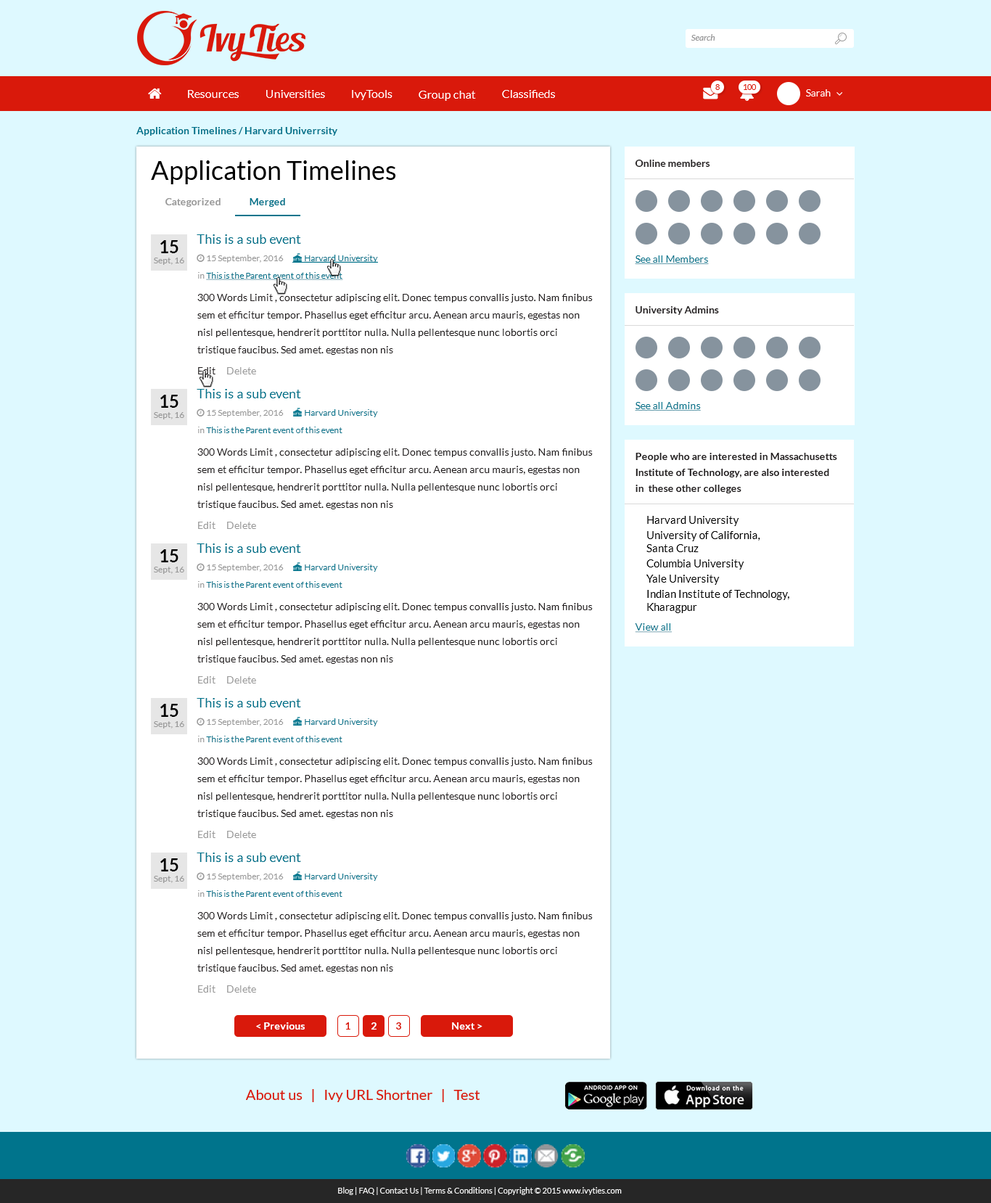
<style>
.page{position:relative;width:991px;height:1203px;background:#def9ff}
.page>*{position:absolute;margin:0}
.t1{font:10.2px "Lato-Bold";color:#00748c}
.t2{font:26.1px "Lato-Regular";color:#000000}
.t3{font:10.2px "Lato-Bold";color:#231f20}
.t4{font:10.2px "Lato-Bold";color:#999999}
.t5{font:8.7px "Lato-Regular";color:#999999}
.t6{font:17.4px "Lato-Bold";color:#000000}
.t7{font:13.1px "Lato-Regular";color:#00748c}
.t8{font:8.7px "Lato-Regular";color:#00748c;text-decoration:underline}
.t9{font:10.2px "Lato-Regular";color:#00748c;text-decoration:underline}
.t10{font:10.2px/17.4px "Lato-Regular";color:#231f20}
.t11{font:10.2px "Lato-Regular";color:#999999}
.t12{font:10.2px "Lato-Regular";color:#231f20}
.t13{font:8.7px "Lato-Regular";color:#00748c}
.t14{font:10.2px/16px "Lato-Bold";color:#231f20}
.t15{font:10.9px "Lato-Regular";color:#000000}
.t16{font:10.2px "Lato-Bold";color:#ffffff}
.t17{font:10.2px "Lato-Bold";color:#d9190b}
</style>
<div class="page">
<p class="t1" style="left:136px;top:127px;width:201px;height:9px">Application Timelines / Harvard Univerrsity</p>
<p class="t2" style="left:151px;top:160px;width:245px;height:24px">Application Timelines</p>
<p class="t3" style="left:635px;top:160px;width:75px;height:7px">Online members</p>
<p class="t4" style="left:165px;top:198px;width:56px;height:9px">Categorized</p>
<p class="t1" style="left:250px;top:198px;width:35px;height:9px">Merged</p>
<p class="t5" style="left:154px;top:240px;width:30px;height:25px;text-align:center"><span class="t6">15<br></span>Sept, 16</p>
<p class="t7" style="left:197px;top:234px;width:104px;height:10px">This is a sub event</p>
<p class="t8" style="left:304px;top:255px;width:74px;height:8px">Harvard University</p>
<p class="t9" style="left:635px;top:255px;width:74px;height:9px">See all Members</p>
<p class="t8" style="left:198px;top:272px;width:145px;height:8px"><span class="t5">in </span>This is the Parent event of this event</p>
<p class="t10" style="left:197px;top:294px;width:396px;height:61px">300 Words Limit , consectetur adipiscing elit. Donec tempus convallis justo. Nam finibus sem et efficitur tempor. Phasellus eget efficitur arcu. Aenean arcu mauris, egestas non  nisl pellentesque, hendrerit porttitor nulla. Nulla pellentesque nunc lobortis orci tristique faucibus. Sed amet. egestas non nis</p>
<p class="t3" style="left:636px;top:306px;width:83px;height:9px">University Admins</p>
<p class="t11" style="left:198px;top:367px;width:58px;height:7px"><span class="t12">Edit</span>     Delete</p>
<p class="t7" style="left:197px;top:389px;width:104px;height:9px">This is a sub event</p>
<p class="t5" style="left:154px;top:395px;width:30px;height:24px;text-align:center"><span class="t6">15<br></span>Sept, 16</p>
<p class="t9" style="left:635px;top:402px;width:66px;height:9px">See all Admins</p>
<p class="t13" style="left:305px;top:409px;width:73px;height:8px">Harvard University</p>
<p class="t13" style="left:198px;top:427px;width:144px;height:6px"><span class="t5">in </span>This is the Parent event of this event</p>
<p class="t10" style="left:197px;top:448px;width:396px;height:61px">300 Words Limit , consectetur adipiscing elit. Donec tempus convallis justo. Nam finibus sem et efficitur tempor. Phasellus eget efficitur arcu. Aenean arcu mauris, egestas non  nisl pellentesque, hendrerit porttitor nulla. Nulla pellentesque nunc lobortis orci tristique faucibus. Sed amet. egestas non nis</p>
<p class="t14" style="left:636px;top:453px;width:201px;height:40px">People who are interested in Massachusetts Institute of Technology, are also interested <br>in  these other colleges</p>
<p class="t11" style="left:198px;top:522px;width:58px;height:7px">Edit     Delete</p>
<p class="t15" style="left:647px;top:516px;width:142px;height:97px">Harvard University<br>University of California, <br>Santa Cruz<br>Columbia University<br>Yale University<br>Indian Institute of Technology, <br>Kharagpur</p>
<p class="t7" style="left:197px;top:543px;width:104px;height:10px">This is a sub event</p>
<p class="t5" style="left:154px;top:549px;width:30px;height:25px;text-align:center"><span class="t6">15<br></span>Sept, 16</p>
<p class="t13" style="left:305px;top:564px;width:73px;height:8px">Harvard University</p>
<p class="t13" style="left:198px;top:581px;width:144px;height:7px"><span class="t5">in </span>This is the Parent event of this event</p>
<p class="t10" style="left:197px;top:603px;width:396px;height:61px">300 Words Limit , consectetur adipiscing elit. Donec tempus convallis justo. Nam finibus sem et efficitur tempor. Phasellus eget efficitur arcu. Aenean arcu mauris, egestas non  nisl pellentesque, hendrerit porttitor nulla. Nulla pellentesque nunc lobortis orci tristique faucibus. Sed amet. egestas non nis</p>
<p class="t9" style="left:635px;top:623px;width:37px;height:10px">View all</p>
<p class="t11" style="left:198px;top:676px;width:58px;height:8px">Edit     Delete</p>
<p class="t7" style="left:197px;top:698px;width:104px;height:9px">This is a sub event</p>
<p class="t5" style="left:154px;top:704px;width:30px;height:25px;text-align:center"><span class="t6">15<br></span>Sept, 16</p>
<p class="t13" style="left:305px;top:718px;width:73px;height:8px">Harvard University</p>
<p class="t13" style="left:198px;top:736px;width:144px;height:6px"><span class="t5">in </span>This is the Parent event of this event</p>
<p class="t10" style="left:197px;top:758px;width:396px;height:60px">300 Words Limit , consectetur adipiscing elit. Donec tempus convallis justo. Nam finibus sem et efficitur tempor. Phasellus eget efficitur arcu. Aenean arcu mauris, egestas non  nisl pellentesque, hendrerit porttitor nulla. Nulla pellentesque nunc lobortis orci tristique faucibus. Sed amet. egestas non nis</p>
<p class="t11" style="left:198px;top:831px;width:58px;height:7px">Edit     Delete</p>
<p class="t7" style="left:197px;top:853px;width:104px;height:9px">This is a sub event</p>
<p class="t5" style="left:154px;top:858px;width:30px;height:25px;text-align:center"><span class="t6">15<br></span>Sept, 16</p>
<p class="t13" style="left:305px;top:873px;width:73px;height:8px">Harvard University</p>
<p class="t13" style="left:198px;top:890px;width:144px;height:7px"><span class="t5">in </span>This is the Parent event of this event</p>
<p class="t10" style="left:197px;top:912px;width:396px;height:61px">300 Words Limit , consectetur adipiscing elit. Donec tempus convallis justo. Nam finibus sem et efficitur tempor. Phasellus eget efficitur arcu. Aenean arcu mauris, egestas non  nisl pellentesque, hendrerit porttitor nulla. Nulla pellentesque nunc lobortis orci tristique faucibus. Sed amet. egestas non nis</p>
<p class="t11" style="left:198px;top:985px;width:58px;height:8px">Edit     Delete</p>
<p class="t16" style="left:256px;top:1022px;width:49px;height:8px">&lt; Previous</p>
<p class="t17" style="left:345px;top:1022px;width:5px;height:8px">1</p>
<p class="t16" style="left:372px;top:1022px;width:5px;height:8px">2</p>
<p class="t17" style="left:396px;top:1022px;width:5px;height:8px">3</p>
<p class="t16" style="left:452px;top:1022px;width:31px;height:8px">Next &gt;</p>
</div>
